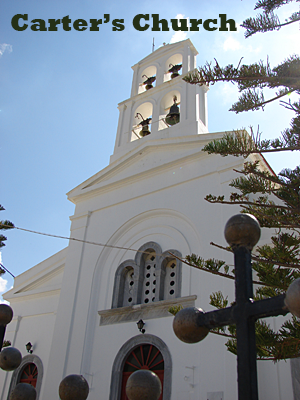
<style>
.page{position:relative;width:300px;height:400px}
.page>*{position:absolute;margin:0}
.t1{font:24px "Rockwell-ExtraBold";color:#242f16}
</style>
<div class="page">
<p class="t1" style="left:11px;top:14px;width:226px;height:17px">Carter’s Church</p>
</div>
